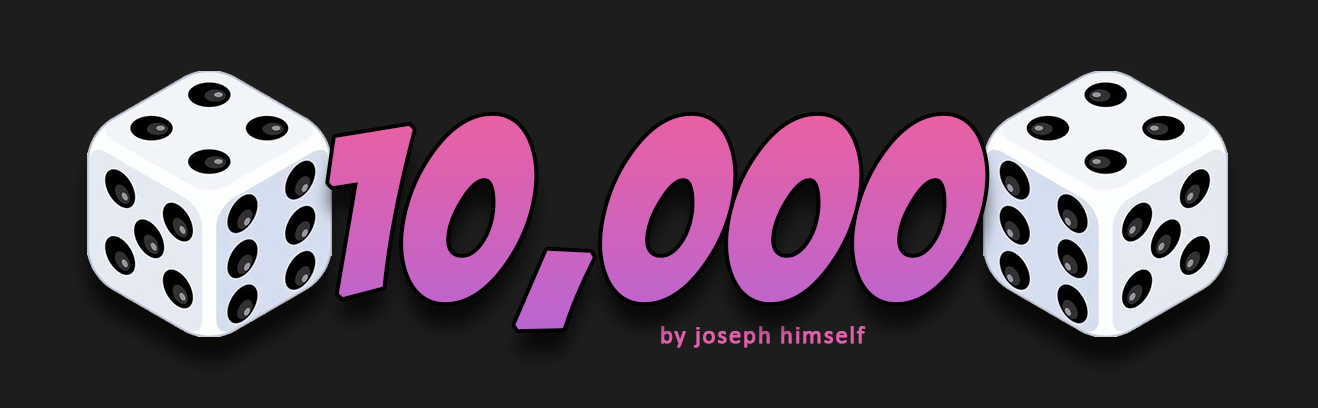
<style>
.page{position:relative;width:1318px;height:408px;background:#1d1d1d}
.page>*{position:absolute;margin:0}
.t1{font:229.2px "BadaBoomBB";letter-spacing:0.04em;color:#d562b7;font-weight:bold}
.t2{font:25px "Calibri";letter-spacing:0.04em;color:#e061aa;font-weight:bold}
</style>
<div class="page">
<p class="t1" style="left:329px;top:115px;width:657px;height:215px">10,000</p>
<p class="t2" style="left:661px;top:326px;width:205px;height:22px">by joseph himself</p>
</div>
